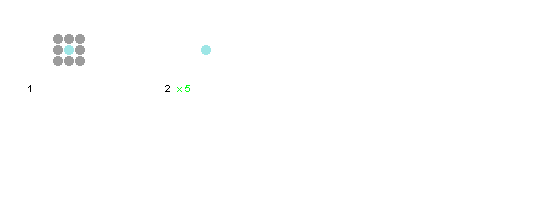
<style>
.page{position:relative;width:550px;height:200px;background:#ffffff}
.page>*{position:absolute;margin:0}
.t1{font:10px "ArialMT";color:#000000}
.t2{font:10px "ArialMT";color:#02fe14}
</style>
<div class="page">
<p class="t1" style="left:28px;top:85px;width:142px;height:7px">1                                            2</p>
<p class="t2" style="left:177px;top:85px;width:13px;height:7px">x 5</p>
</div>
